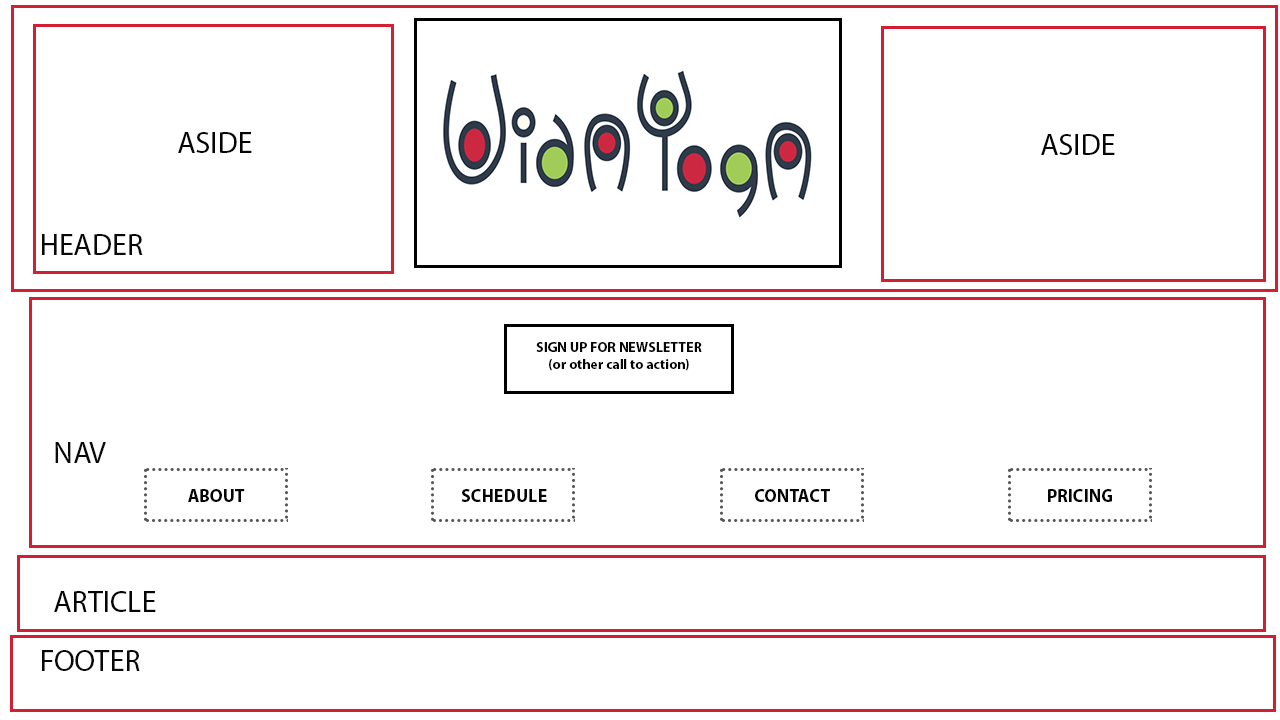
<style>
.page{position:relative;width:1280px;height:720px;background:#ffffff}
.page>*{position:absolute;margin:0}
.t1{font:30px "MyriadPro-Regular";color:#050505}
.t2{font:30px "MyriadPro-Regular";color:#090909}
.t3{font:14px "MyriadPro-Bold";color:#050505}
.t4{font:18px "MyriadPro-Bold";color:#050505}
</style>
<div class="page">
<p class="t1" style="left:178px;top:132px;width:74px;height:21px">ASIDE</p>
<p class="t1" style="left:1041px;top:134px;width:74px;height:21px">ASIDE</p>
<p class="t2" style="left:42px;top:234px;width:101px;height:21px">HEADER</p>
<p class="t3" style="left:536px;top:342px;width:166px;height:29px;text-align:center">SIGN UP FOR NEWSLETTER <br>(or other call to action)</p>
<p class="t2" style="left:55px;top:442px;width:51px;height:21px">NAV</p>
<p class="t4" style="left:188px;top:489px;width:57px;height:13px">ABOUT</p>
<p class="t4" style="left:461px;top:489px;width:86px;height:13px">SCHEDULE</p>
<p class="t4" style="left:755px;top:489px;width:75px;height:13px">CONTACT</p>
<p class="t4" style="left:1048px;top:489px;width:64px;height:13px">PRICING</p>
<p class="t1" style="left:54px;top:591px;width:102px;height:21px">ARTICLE</p>
<p class="t2" style="left:42px;top:650px;width:98px;height:21px">FOOTER</p>
</div>
